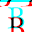
<style>
.page{position:relative;width:32px;height:32px;background:#ffffff}
.page>*{position:absolute;margin:0}
.t1{font:32px "EBGaramond"}
</style>
<div class="page">
<p class="t1" style="left:7px;top:5px;width:18px;height:22px">B</p>
</div>
